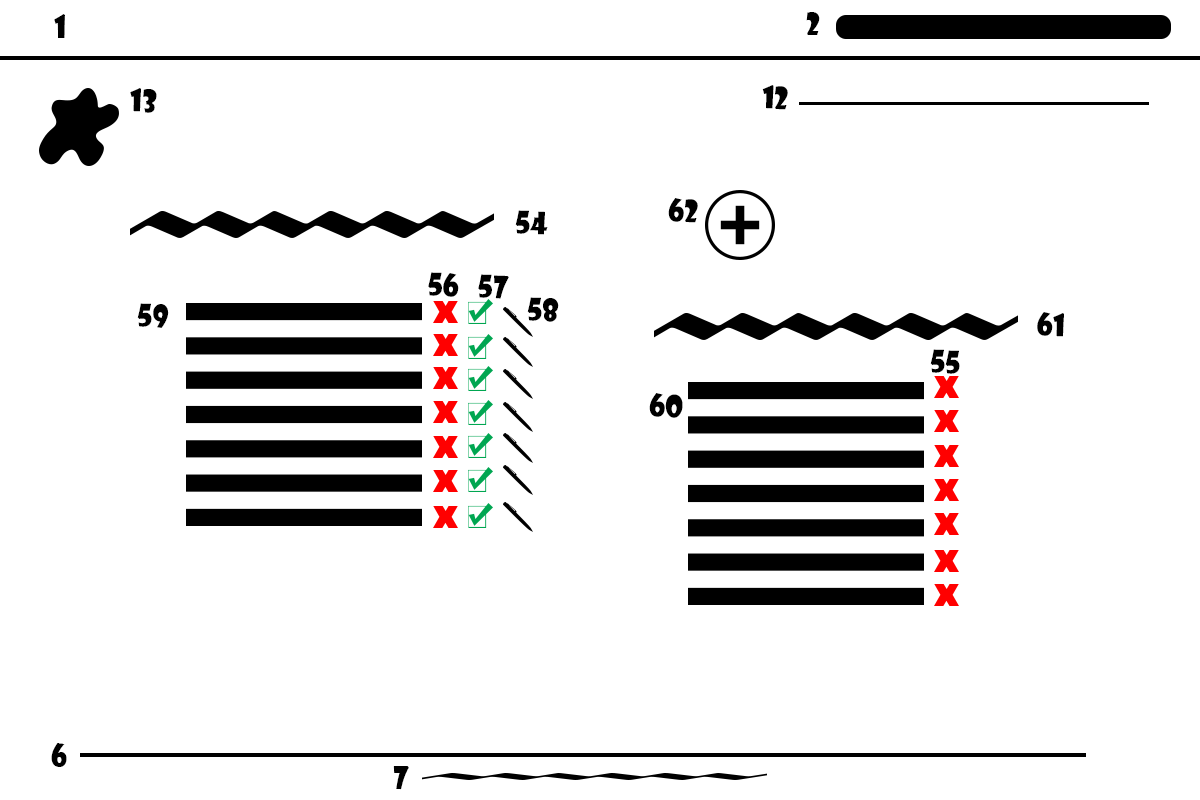
<style>
.page{position:relative;width:1200px;height:800px;background:#ffffff}
.page>*{position:absolute;margin:0}
.t1{font:30px "ShowcardGothic-Reg";color:#000000}
</style>
<div class="page">
<p class="t1" style="left:54px;top:14px;width:11px;height:24px">1</p>
<p class="t1" style="left:806px;top:12px;width:14px;height:23px">2</p>
<p class="t1" style="left:130px;top:88px;width:27px;height:25px;rotate:2deg">13</p>
<p class="t1" style="left:762px;top:85px;width:26px;height:25px;rotate:2deg">12</p>
<p class="t1" style="left:668px;top:198px;width:30px;height:25px;rotate:2deg">62</p>
<p class="t1" style="left:515px;top:210px;width:33px;height:25px;rotate:2deg">54</p>
<p class="t1" style="left:428px;top:272px;width:31px;height:25px;rotate:2deg">56</p>
<p class="t1" style="left:478px;top:274px;width:31px;height:25px;rotate:2deg">57</p>
<p class="t1" style="left:137px;top:303px;width:32px;height:25px;rotate:2deg">59</p>
<p class="t1" style="left:527px;top:297px;width:32px;height:25px;rotate:2deg">58</p>
<p class="t1" style="left:1037px;top:312px;width:27px;height:25px;rotate:2deg">61</p>
<p class="t1" style="left:930px;top:349px;width:30px;height:25px;rotate:2deg">55</p>
<p class="t1" style="left:649px;top:393px;width:34px;height:25px;rotate:2deg">60</p>
<p class="t1" style="left:51px;top:743px;width:16px;height:24px">6</p>
<p class="t1" style="left:393px;top:766px;width:16px;height:24px">7</p>
</div>
